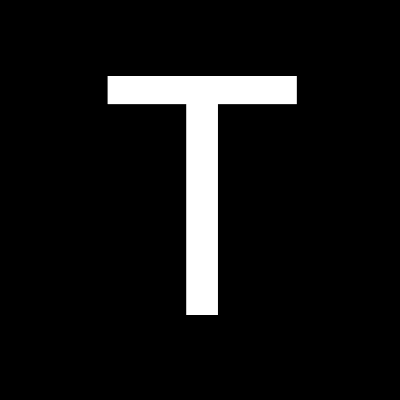
<style>
.page{position:relative;width:400px;height:400px;background:#000000}
.page>*{position:absolute;margin:0}
.t1{font:333.2px "ArialMT";color:#ffffff}
</style>
<div class="page">
<p class="t1" style="left:107px;top:76px;width:190px;height:239px">T</p>
</div>
